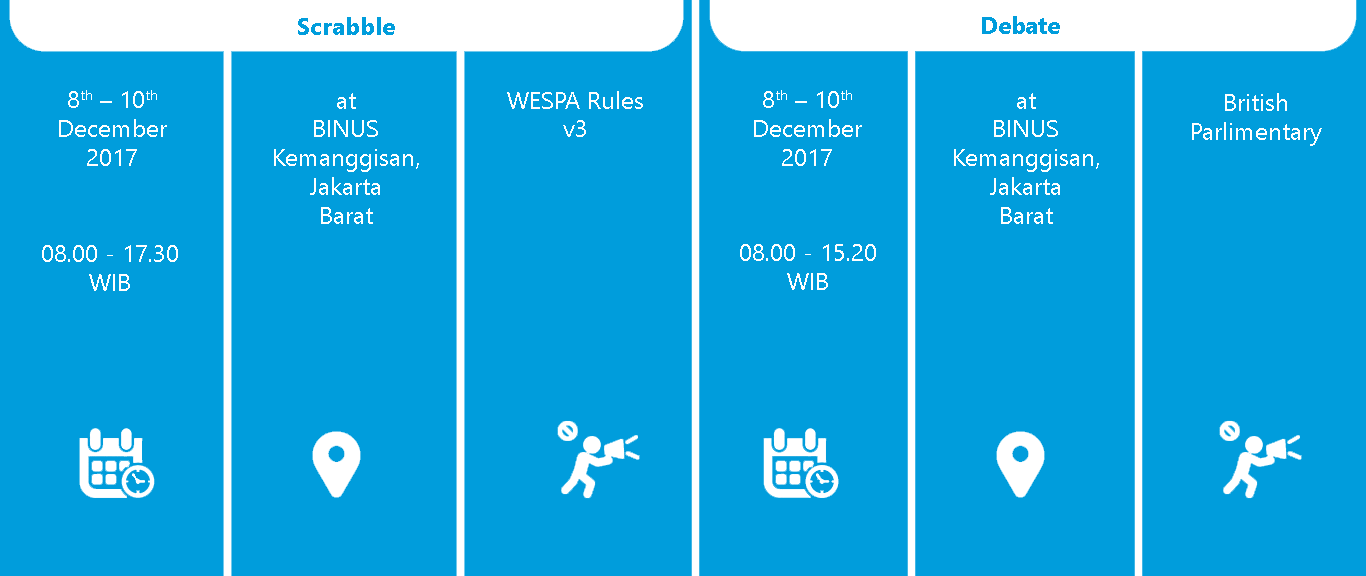
<style>
.page{position:relative;width:1366px;height:576px;background:#009ddc}
.page>*{position:absolute;margin:0}
.t1{font:24px "SegoeUI-Bold";color:#009ddc}
.t2{font:24px "SegoeUI";color:#fefefe}
.t3{font:24px "SegoeUI";color:#ffffff}
.t4{font:24px "SegoeUI";color:#fffefe}
</style>
<div class="page">
<p class="t1" style="left:298px;top:17px;width:97px;height:18px">Scrabble</p>
<p class="t1" style="left:982px;top:16px;width:78px;height:18px">Debate</p>
<p class="t2" style="left:59px;top:90px;width:108px;height:76px;text-align:center">8th – 10th<br>December<br>2017</p>
<p class="t3" style="left:274px;top:93px;width:145px;height:131px;text-align:center">at<br>BINUS<br>Kemanggisan,<br>Jakarta<br>Barat</p>
<p class="t2" style="left:507px;top:91px;width:136px;height:46px;text-align:center">WESPA Rules<br>v3</p>
<p class="t3" style="left:754px;top:90px;width:108px;height:76px;text-align:center">8th – 10th<br>December<br>2017</p>
<p class="t3" style="left:954px;top:93px;width:145px;height:131px;text-align:center">at<br>BINUS<br>Kemanggisan,<br>Jakarta<br>Barat</p>
<p class="t3" style="left:1192px;top:93px;width:130px;height:53px;text-align:center">British<br>Parlimentary</p>
<p class="t3" style="left:42px;top:245px;width:136px;height:46px;text-align:center">08.00 - 17.30<br>WIB</p>
<p class="t4" style="left:740px;top:244px;width:136px;height:46px;text-align:center">08.00 - 15.20<br>WIB</p>
</div>
